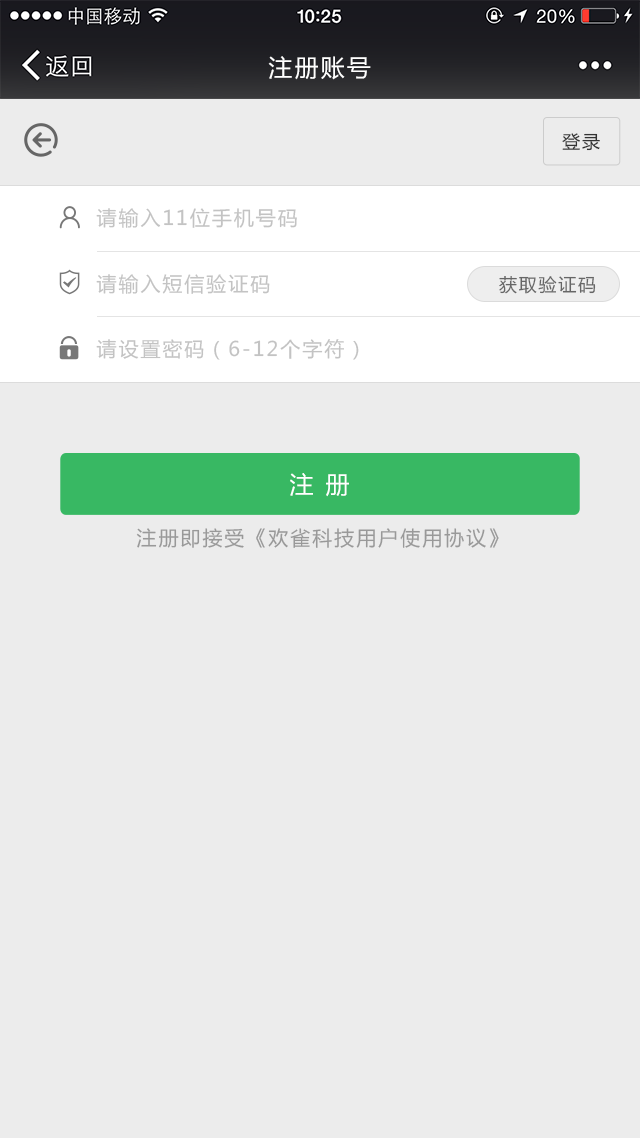
<style>
.page{position:relative;width:640px;height:1138px;background:#ececec}
.page>*{position:absolute;margin:0}
.t1{font:23.7px "MicrosoftYaHei";letter-spacing:0.1em;color:#ffffff}
.t2{font:18px "MicrosoftYaHei";letter-spacing:0.1em;color:#333333}
.t3{font:20px "MicrosoftYaHei";letter-spacing:0.1em;color:#c3c3c3}
.t4{font:18px "MicrosoftYaHei";letter-spacing:0.1em;color:#666666}
.t5{font:24px "MicrosoftYaHei";letter-spacing:0.1em;color:#ffffff}
.t6{font:20px "MicrosoftYaHei";letter-spacing:0.1em;color:#999999}
</style>
<div class="page">
<p class="t1" style="left:268px;top:56px;width:103px;height:24px">注册账号</p>
<p class="t2" style="left:562px;top:133px;width:38px;height:18px">登录</p>
<p class="t3" style="left:96px;top:208px;width:201px;height:20px">请输入11位手机号码</p>
<p class="t3" style="left:96px;top:274px;width:174px;height:20px">请输入短信验证码</p>
<p class="t4" style="left:499px;top:276px;width:97px;height:18px">获取验证码</p>
<p class="t3" style="left:96px;top:339px;width:263px;height:21px">请设置密码（6-12个字符）</p>
<p class="t5" style="left:290px;top:473px;width:59px;height:24px">注 册</p>
<p class="t6" style="left:136px;top:528px;width:363px;height:20px">注册即接受《欢雀科技用户使用协议》</p>
</div>
